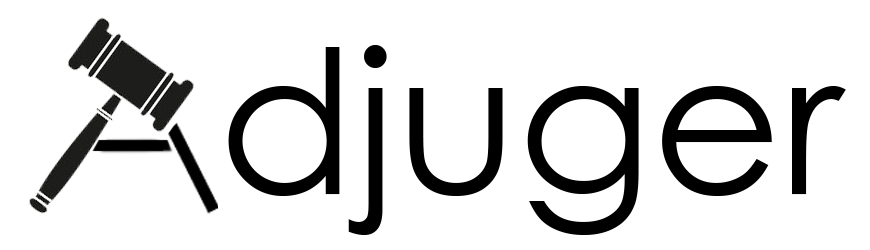
<style>
.page{position:relative;width:870px;height:250px;background:#ffffff}
.page>*{position:absolute;margin:0}
.t1{font:200px "CenturyGothic";color:#000000}
</style>
<div class="page">
<p class="t1" style="left:228px;top:45px;width:618px;height:190px">djuger</p>
</div>
